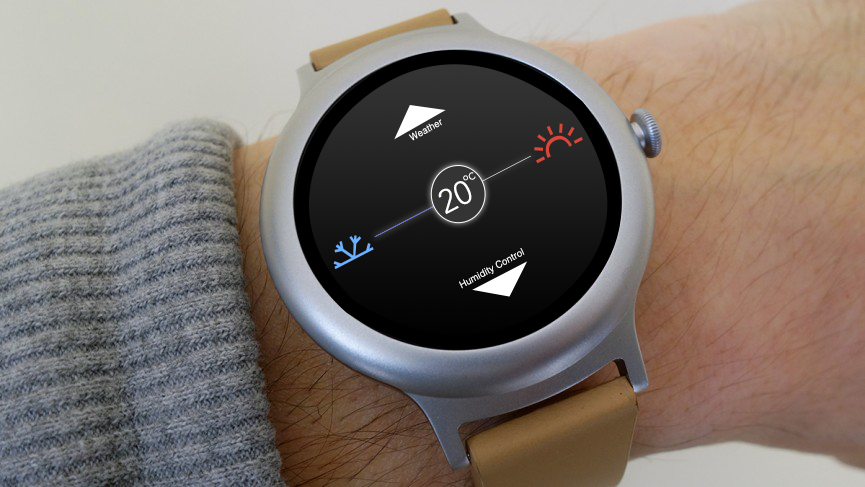
<style>
.page{position:relative;width:865px;height:487px}
.page>*{position:absolute;margin:0}
.t1{font:9.5px "Helvetica-Light";letter-spacing:0.025em;color:#ffffff;scale:0.97 1}
.t2{font:9.5px "Avenir-Light";letter-spacing:0.025em;color:#ffffff;scale:0.97 1}
.t3{font:32.3px "Avenir-Light";letter-spacing:0.025em;color:#ffffff;scale:0.97 1}
</style>
<div class="page">
<p class="t1" style="left:408px;top:119px;width:34px;height:22px;rotate:-29deg">Weather</p>
<p class="t2" style="left:468px;top:172px;width:8px;height:8px;rotate:-27deg">C</p>
<p class="t3" style="left:438px;top:181px;width:34px;height:33px;rotate:-27deg">20</p>
<p class="t2" style="left:463px;top:175px;width:5px;height:6px;rotate:-27deg">o</p>
<p class="t1" style="left:459px;top:248px;width:66px;height:41px;rotate:-29deg">Humidity Control</p>
</div>
